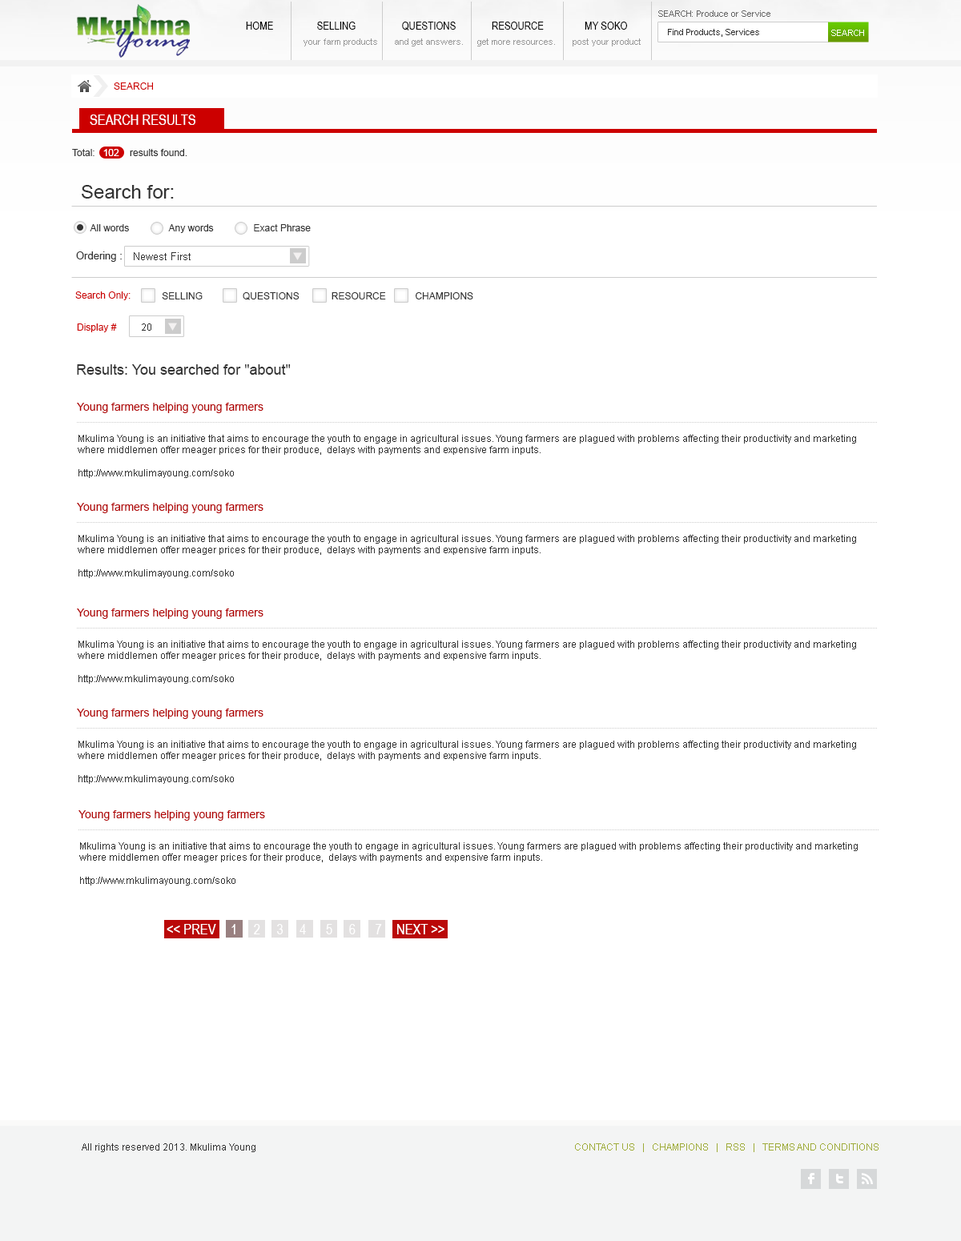
<style>
.page{position:relative;width:961px;height:1241px;background:#ffffff}
.page>*{position:absolute;margin:0}
.t1{font:8.8px "ArialMT";color:#666666}
.t2{font:11.2px "ArialNarrow";color:#000000}
.t3{font:8.8px "ArialMT";color:#333333}
.t4{font:8.8px "ArialMT";color:#ffffff}
.t5{font:8.8px "ArialMT";color:#999999}
.t6{font:9.6px "ArialMT";color:#cc0000}
.t7{font:14.4px "ArialNarrow";color:#ffffff}
.t8{font:9.6px "ArialMT";color:#333333}
.t9{font:9.6px "ArialMT";color:#ffffff}
.t10{font:19.2px "ArialMT";color:#333333}
.t11{font:10.4px "ArialMT";color:#333333}
.t12{font:14.4px "ArialMT";color:#333333}
.t13{font:11.2px "ArialMT";color:#b20303}
.t14{font:9.6px "ArialMT";color:#9eab39}
</style>
<div class="page">
<p class="t1" style="left:658px;top:10px;width:112px;height:7px">SEARCH: Produce or Service</p>
<p class="t2" style="left:246px;top:22px;width:381px;height:8px">HOME                 SELLING                  QUESTIONS              RESOURCE                MY SOKO</p>
<p class="t3" style="left:668px;top:29px;width:91px;height:8px">Find Products, Services</p>
<p class="t4" style="left:831px;top:30px;width:33px;height:6px">SEARCH</p>
<p class="t5" style="left:303px;top:38px;width:74px;height:8px">your farm products</p>
<p class="t5" style="left:395px;top:38px;width:68px;height:8px">and get answers.</p>
<p class="t5" style="left:477px;top:38px;width:78px;height:8px">get more resources.</p>
<p class="t5" style="left:572px;top:38px;width:69px;height:8px">post your product</p>
<p class="t6" style="left:114px;top:82px;width:39px;height:8px">SEARCH</p>
<p class="t7" style="left:90px;top:114px;width:105px;height:11px">SEARCH RESULTS</p>
<p class="t8" style="left:72px;top:149px;width:115px;height:7px">Total:   <span class="t9">102</span>    results found.</p>
<p class="t10" style="left:82px;top:185px;width:92px;height:14px">Search for:</p>
<p class="t8" style="left:90px;top:224px;width:221px;height:9px">All words               Any words               Exact Phrase</p>
<p class="t11" style="left:76px;top:251px;width:46px;height:11px">Ordering :</p>
<p class="t11" style="left:134px;top:252px;width:57px;height:8px">Newest First</p>
<p class="t6" style="left:75px;top:291px;width:56px;height:9px">Search Only:</p>
<p class="t8" style="left:162px;top:292px;width:311px;height:8px">SELLING               QUESTIONS            RESOURCE           CHAMPIONS</p>
<p class="t6" style="left:77px;top:323px;width:40px;height:9px">Display #</p>
<p class="t8" style="left:142px;top:323px;width:9px;height:8px">20</p>
<p class="t12" style="left:77px;top:364px;width:214px;height:11px">Results: You searched for "about"</p>
<p class="t13" style="left:77px;top:403px;width:186px;height:10px">Young farmers helping young farmers</p>
<p class="t8" style="left:78px;top:435px;width:778px;height:43px">Mkulima Young is an initiative that aims to encourage the youth to engage in agricultural issues. Young farmers are plagued with problems affecting their productivity and marketing where middlemen offer meager prices for their produce,  delays with payments and expensive farm inputs.<br><br>http://www.mkulimayoung.com/soko</p>
<p class="t13" style="left:77px;top:503px;width:186px;height:10px">Young farmers helping young farmers</p>
<p class="t8" style="left:78px;top:535px;width:778px;height:43px">Mkulima Young is an initiative that aims to encourage the youth to engage in agricultural issues. Young farmers are plagued with problems affecting their productivity and marketing where middlemen offer meager prices for their produce,  delays with payments and expensive farm inputs.<br><br>http://www.mkulimayoung.com/soko</p>
<p class="t13" style="left:77px;top:609px;width:186px;height:10px">Young farmers helping young farmers</p>
<p class="t8" style="left:78px;top:641px;width:778px;height:43px">Mkulima Young is an initiative that aims to encourage the youth to engage in agricultural issues. Young farmers are plagued with problems affecting their productivity and marketing where middlemen offer meager prices for their produce,  delays with payments and expensive farm inputs.<br><br>http://www.mkulimayoung.com/soko</p>
<p class="t13" style="left:77px;top:709px;width:186px;height:10px">Young farmers helping young farmers</p>
<p class="t8" style="left:78px;top:741px;width:778px;height:43px">Mkulima Young is an initiative that aims to encourage the youth to engage in agricultural issues. Young farmers are plagued with problems affecting their productivity and marketing where middlemen offer meager prices for their produce,  delays with payments and expensive farm inputs.<br><br>http://www.mkulimayoung.com/soko</p>
<p class="t13" style="left:78px;top:810px;width:187px;height:11px">Young farmers helping young farmers</p>
<p class="t8" style="left:79px;top:842px;width:779px;height:44px">Mkulima Young is an initiative that aims to encourage the youth to engage in agricultural issues. Young farmers are plagued with problems affecting their productivity and marketing where middlemen offer meager prices for their produce,  delays with payments and expensive farm inputs.<br><br>http://www.mkulimayoung.com/soko</p>
<p class="t7" style="left:167px;top:924px;width:49px;height:10px">&lt;&lt; PREV</p>
<p class="t7" style="left:397px;top:924px;width:47px;height:10px">NEXT &gt;&gt;</p>
<p class="t8" style="left:82px;top:1143px;width:173px;height:9px">All rights reserved 2013. Mkulima Young</p>
<p class="t14" style="left:575px;top:1143px;width:303px;height:9px">CONTACT US   |   CHAMPIONS   |   RSS   |   TERMS AND CONDITIONS</p>
</div>
